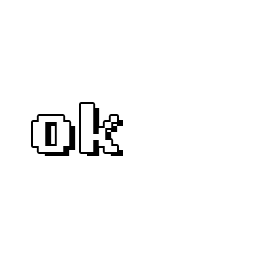
<style>
.page{position:relative;width:256px;height:256px;background:#ffffff}
.page>*{position:absolute;margin:0}
.t1{font:72px "LoRes12OT-Bold";color:#fefefe}
.t2{font:72px "LoRes12OT-Bold"}
</style>
<div class="page">
<p class="t1" style="left:33px;top:104px;width:84px;height:48px">ok</p>
<p class="t2" style="left:39px;top:108px;width:84px;height:48px">ok</p>
</div>
